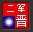
<style>
.page{position:relative;width:33px;height:32px;background:#f20000}
.page>*{position:absolute;margin:0}
.t1{font:10.4px "SimSun";color:#ffffff}
.t2{font:11.7px "SimSun";color:#ffffff}
</style>
<div class="page">
<p class="t1" style="left:7px;top:4px;width:18px;height:8px">二军</p>
<p class="t2" style="left:16px;top:15px;width:11px;height:12px">晋</p>
</div>
